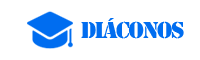
<style>
.page{position:relative;width:200px;height:60px;background:#ffffff}
.page>*{position:absolute;margin:0}
.t1{font:24px "Stencil";letter-spacing:-0.06em;color:#006df0}
</style>
<div class="page">
<p class="t1" style="left:81px;top:18px;width:103px;height:21px">DIÁCONOS</p>
</div>
